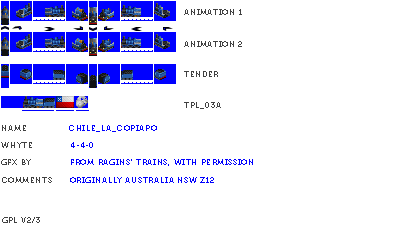
<style>
.page{position:relative;width:400px;height:230px;background:#ffffff}
.page>*{position:absolute;margin:0}
.t1{font:8px "Museo700-Regular";letter-spacing:0.075em;color:#404040;text-transform:uppercase}
.t2{font:8px "Museo700-Regular";letter-spacing:0.075em;color:#0000ff;text-transform:uppercase}
</style>
<div class="page">
<p class="t1" style="left:184px;top:9px;width:58px;height:6px">Animation 1</p>
<p class="t1" style="left:184px;top:41px;width:58px;height:6px">Animation 2</p>
<p class="t1" style="left:184px;top:71px;width:34px;height:6px">tender</p>
<p class="t1" style="left:184px;top:102px;width:37px;height:7px">tpl_03a</p>
<p class="t1" style="left:2px;top:125px;width:24px;height:6px">name</p>
<p class="t2" style="left:69px;top:125px;width:88px;height:7px">Chile_La_Copiapo</p>
<p class="t1" style="left:1px;top:142px;width:31px;height:6px">whyte</p>
<p class="t2" style="left:71px;top:142px;width:22px;height:6px">4-4-0</p>
<p class="t1" style="left:1px;top:159px;width:30px;height:6px">gfx by</p>
<p class="t2" style="left:71px;top:159px;width:182px;height:7px">from ragins' trains, with permission</p>
<p class="t1" style="left:2px;top:177px;width:50px;height:6px">comments</p>
<p class="t2" style="left:70px;top:177px;width:144px;height:6px">originally australia nsw z12</p>
<p class="t1" style="left:2px;top:217px;width:38px;height:6px">gpl v2/3</p>
</div>
